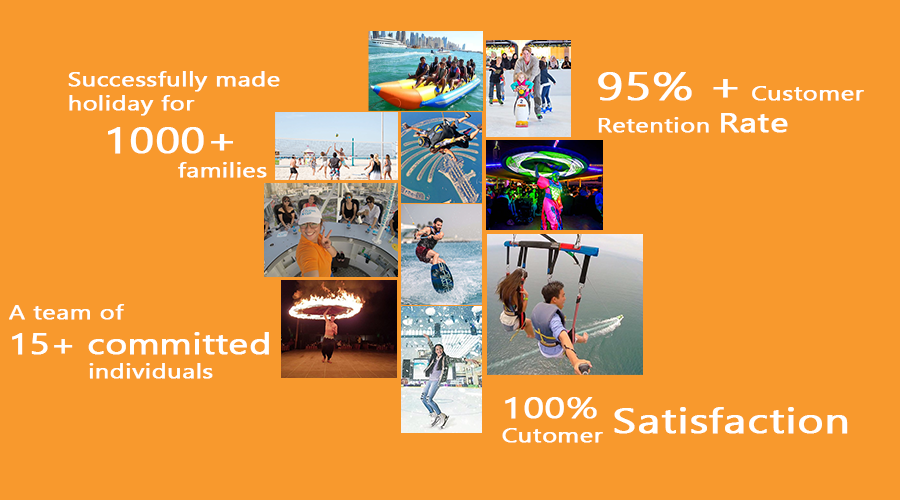
<style>
.page{position:relative;width:900px;height:500px;background:#f8992d}
.page>*{position:absolute;margin:0}
.t1{font:20px "Gadugi";color:#ffffff;font-weight:bold;scale:1.26 1}
.t2{font:36px "Gadugi";color:#ffffff;font-weight:bold;scale:1.26 1}
.t3{font:39px "Gadugi";color:#ffffff;font-weight:bold;scale:1.26 1}
.t4{font:27px "Gadugi";color:#ffffff;font-weight:bold;scale:1.26 1}
.t5{font:29px "Gadugi";color:#ffffff;font-weight:bold;scale:1.26 1}
.t6{font:30px "Gadugi";color:#ffffff;font-weight:bold;scale:1.26 1}
.t7{font:35px "Gadugi";color:#ffffff;font-weight:bold;scale:1.26 1}
</style>
<div class="page">
<p class="t1" style="left:68px;top:71px;width:212px;height:107px">Successfully made <br>holiday for <br> <span class="t2">1000+</span> <br>       families</p>
<p class="t1" style="left:598px;top:72px;width:266px;height:61px"><span class="t3">95% +</span> Customer <br>Retention <span class="t4">Rate</span></p>
<p class="t5" style="left:9px;top:304px;width:260px;height:75px"><span class="t1">A team of<br></span>15+ committed<span class="t1"> <br>   individuals</span></p>
<p class="t1" style="left:502px;top:397px;width:101px;height:46px"><span class="t6">100%<br></span>Cutomer</p>
<p class="t7" style="left:614px;top:407px;width:234px;height:27px">Satisfaction</p>
</div>
